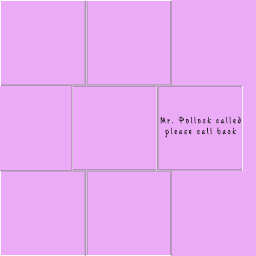
<style>
.page{position:relative;width:256px;height:256px;background:#ecabf7}
.page>*{position:absolute;margin:0}
.t1{font:9px "Chalky-Regular";letter-spacing:0.205em;color:#181716}
</style>
<div class="page">
<p class="t1" style="left:160px;top:116px;width:81px;height:22px;text-align:center">Mr. Pollock called<br>please call back</p>
</div>
